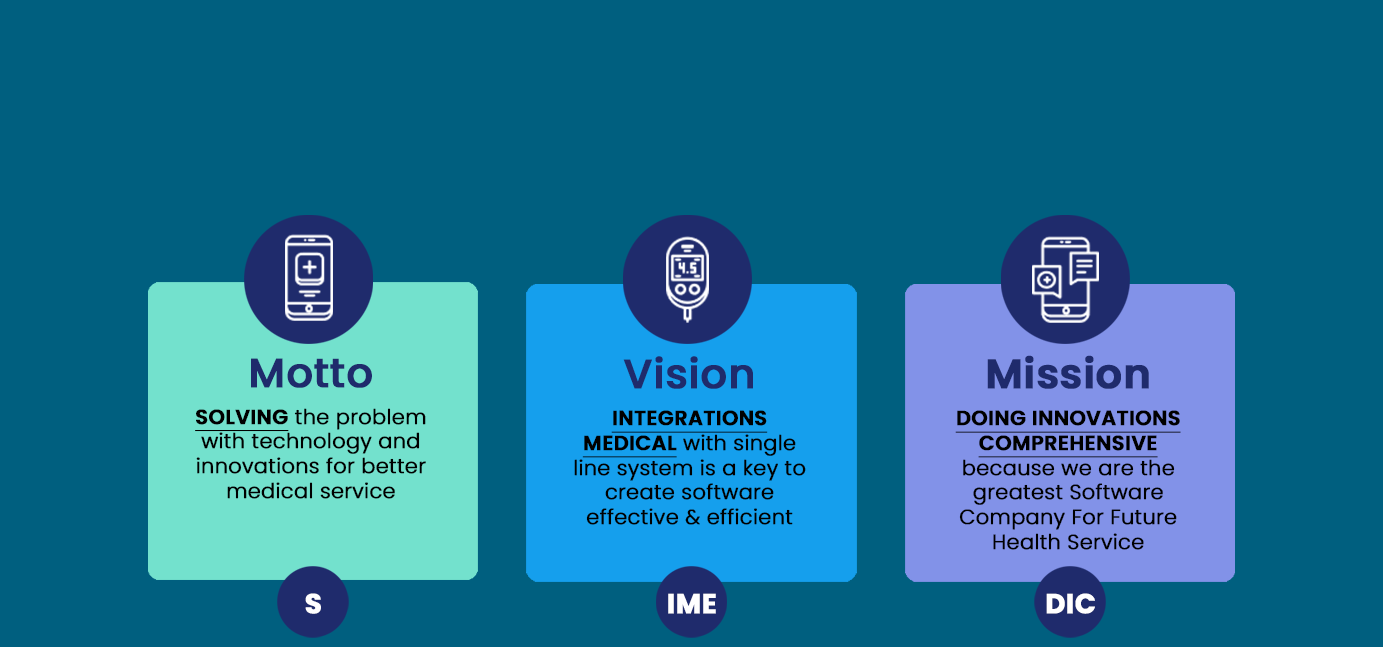
<style>
.page{position:relative;width:1383px;height:647px;background:#005f7f}
.page>*{position:absolute;margin:0}
.t1{font:41.1px "Poppins-Medium";color:#1f2b6c;font-weight:bold}
.t2{font:41.1px "Poppins-SemiBold";color:#1f2b6c;font-weight:bold}
.t3{font:20.6px "Poppins-Light";color:#000000;font-weight:bold}
.t4{font:20.6px "Poppins-SemiBold";color:#000000;font-weight:bold;text-decoration:underline}
.t5{font:27.4px "Poppins-Bold";color:#ffffff;font-weight:bold}
</style>
<div class="page">
<p class="t1" style="left:251px;top:358px;width:121px;height:30px">Motto</p>
<p class="t1" style="left:623px;top:356px;width:130px;height:33px">Vision</p>
<p class="t2" style="left:987px;top:355px;width:162px;height:34px">Mission</p>
<p class="t3" style="left:195px;top:408px;width:231px;height:91px;text-align:center"><span class="t4">SOLVING</span> the problem<br>with technology and<br>innovations for better<br>medical service</p>
<p class="t3" style="left:574px;top:410px;width:232px;height:115px;text-align:center"><span class="t4">INTEGRATIONS<br>MEDICAL</span> with single<br>line system is a key to<br>create software<br>effective &amp; efficient</p>
<p class="t3" style="left:955px;top:410px;width:226px;height:140px;text-align:center"><span class="t4">DOING INNOVATIONS<br>COMPREHENSIVE<br></span>because we are the<br>greatest Software<br>Company For Future<br>Health Service</p>
<p class="t5" style="left:305px;top:593px;width:16px;height:21px">S</p>
<p class="t5" style="left:668px;top:593px;width:48px;height:21px">IME</p>
<p class="t5" style="left:1046px;top:593px;width:49px;height:21px">DIC</p>
</div>
